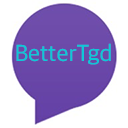
<style>
.page{position:relative;width:128px;height:128px;background:#ffffff}
.page>*{position:absolute;margin:0}
.t1{font:24px "AppleSDGothicNeo-Medium";color:#0ec7d8}
</style>
<div class="page">
<p class="t1" style="left:16px;top:43px;width:95px;height:22px">BetterTgd</p>
</div>
